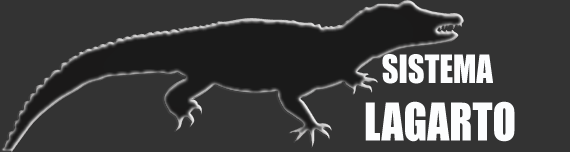
<style>
.page{position:relative;width:570px;height:152px;background:#333333}
.page>*{position:absolute;margin:0}
.t1{font:36px "Impact";color:#fcfdfe;scale:0.9 1}
.t2{font:48px "Impact";color:#fcfdfe;scale:0.9 1}
</style>
<div class="page">
<p class="t1" style="left:365px;top:54px;width:150px;height:88px;text-align:center">SISTEMA <br><span class="t2">LAGARTO</span></p>
</div>
